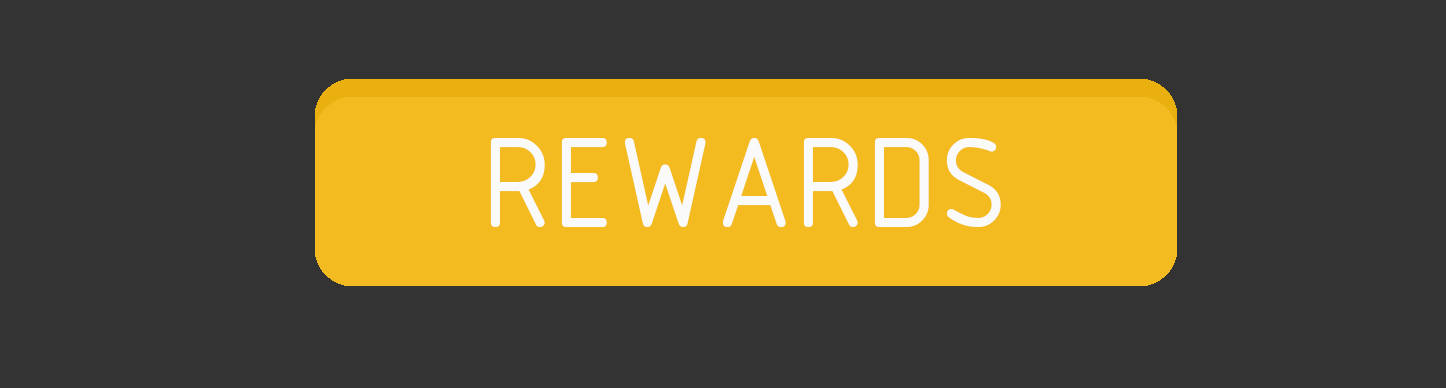
<style>
.page{position:relative;width:1446px;height:388px;background:#333333}
.page>*{position:absolute;margin:0}
.t1{font:125px "GOST-Common";color:#fafafa}
</style>
<div class="page">
<p class="t1" style="left:490px;top:138px;width:511px;height:89px">REWARDS</p>
</div>
